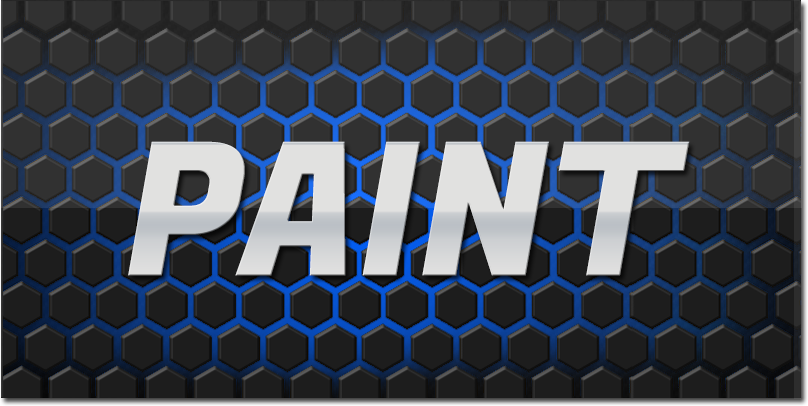
<style>
.page{position:relative;width:808px;height:406px;background:#313131}
.page>*{position:absolute;margin:0}
.t1{font:185.2px "FugazOne-Regular";color:#dfdfdf}
</style>
<div class="page">
<p class="t1" style="left:128px;top:141px;width:562px;height:135px">PAINT</p>
</div>
